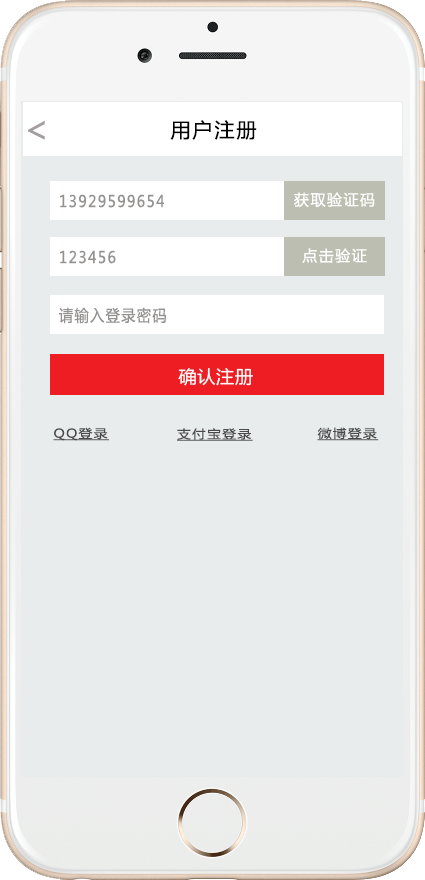
<style>
.page{position:relative;width:425px;height:880px;background:#e8eced}
.page>*{position:absolute;margin:0}
.t1{font:36px "MicrosoftYaHei";letter-spacing:0.1em;color:#a49e9e}
.t2{font:20px "MicrosoftYaHei";letter-spacing:0.1em;color:#000000}
.t3{font:16px "MicrosoftYaHei";letter-spacing:0.1em;color:#949291;scale:0.89 1}
.t4{font:15px "MicrosoftYaHei";letter-spacing:0.1em;color:#ffffff}
.t5{font:18px "MicrosoftYaHei";letter-spacing:0.02em;color:#ffffff}
.t6{font:11.9px "MicrosoftYaHei";letter-spacing:0.1em;color:#4a4a4a;text-decoration:underline;scale:1.15 1}
</style>
<div class="page">
<p class="t1" style="left:28px;top:120px;width:17px;height:20px">&lt;</p>
<p class="t2" style="left:170px;top:120px;width:87px;height:20px">用户注册</p>
<p class="t3" style="left:60px;top:194px;width:104px;height:14px">13929599654</p>
<p class="t4" style="left:294px;top:192px;width:81px;height:16px">获取验证码</p>
<p class="t3" style="left:60px;top:250px;width:56px;height:14px">123456</p>
<p class="t4" style="left:302px;top:248px;width:65px;height:15px">点击验证</p>
<p class="t3" style="left:59px;top:307px;width:107px;height:17px">请输入登录密码</p>
<p class="t5" style="left:178px;top:368px;width:75px;height:18px">确认注册</p>
<p class="t6" style="left:53px;top:427px;width:56px;height:14px">QQ登录</p>
<p class="t6" style="left:177px;top:428px;width:76px;height:13px">支付宝登录</p>
<p class="t6" style="left:317px;top:427px;width:62px;height:14px">微博登录</p>
</div>
